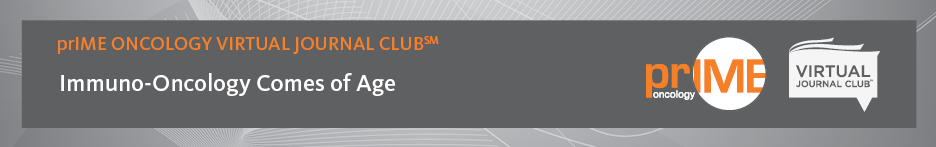
<style>
.page{position:relative;width:936px;height:147px;background:#5f6062}
.page>*{position:absolute;margin:0}
.t1{font:19px "KievitOT-Medium";color:#f68026}
.t2{font:24px "KievitOT-Medium";color:#ffffff}
</style>
<div class="page">
<p class="t1" style="left:58px;top:36px;width:381px;height:18px">prIME ONCOLOGY VIRTUAL JOURNAL CLUBSM</p>
<p class="t2" style="left:61px;top:73px;width:334px;height:23px">Immuno-Oncology Comes of Age</p>
</div>
